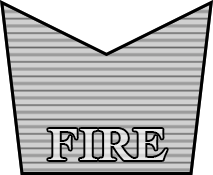
<style>
.page{position:relative;width:213px;height:175px;background:#d0d0d0}
.page>*{position:absolute;margin:0}
.t1{font:48px "Cochin-Bold";color:#eaeaea}
</style>
<div class="page">
<p class="t1" style="left:48px;top:129px;width:119px;height:31px">FIRE</p>
</div>
